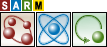
<style>
.page{position:relative;width:107px;height:47px}
.page>*{position:absolute;margin:0}
.t1{font:11px "ArialNarrow-Bold";letter-spacing:-0.002em;color:#ffffff}
.t2{font:11px "ArialNarrow-Bold";letter-spacing:-0.002em;color:#000000}
</style>
<div class="page">
<p class="t1" style="left:2px;top:1px;width:6px;height:9px">S</p>
<p class="t1" style="left:12px;top:1px;width:8px;height:9px">A</p>
<p class="t1" style="left:24px;top:1px;width:7px;height:9px">R</p>
<p class="t2" style="left:35px;top:1px;width:7px;height:9px">M</p>
</div>
